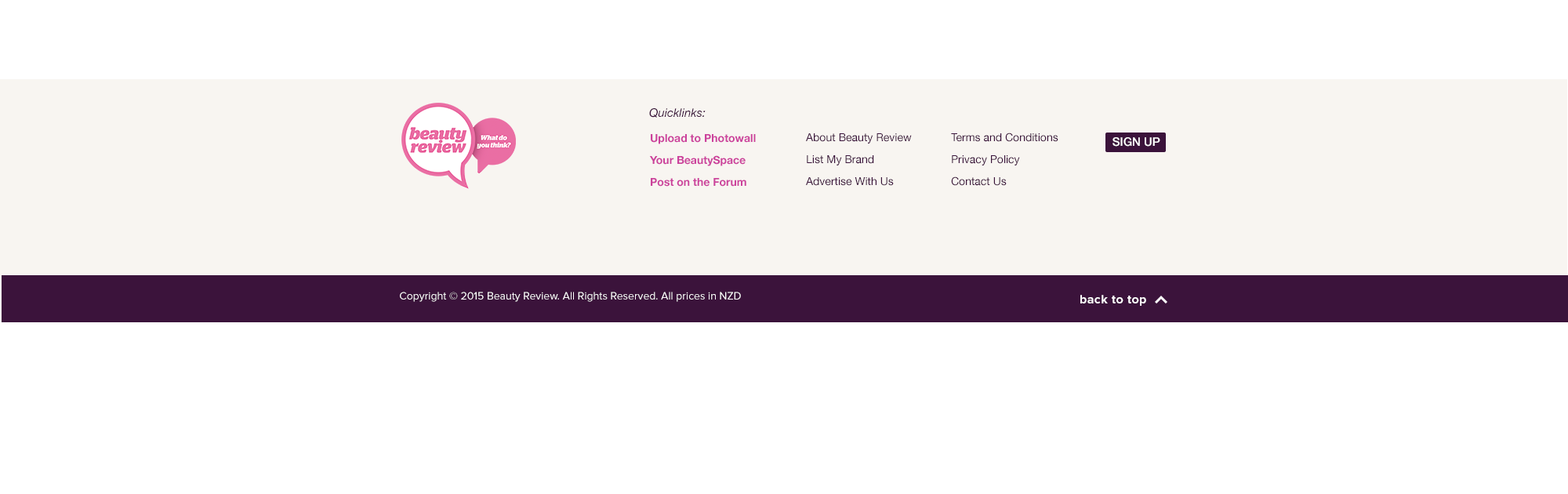
<style>
.page{position:relative;width:1568px;height:494px;background:#ffffff}
.page>*{position:absolute;margin:0}
.t1{font:11.8px "HelveticaNeue-Italic";color:#3b133b}
.t2{font:11px/22px "HelveticaNeue-Bold";color:#cc419c}
.t3{font:11px/22px "HelveticaNeue";color:#3b133b}
.t4{font:11.8px "HelveticaNeue-Medium";color:#ffffff}
.t5{font:11px "ProximaNova-Regular";color:#ffffff}
.t6{font:12.5px "ProximaNova-Bold";letter-spacing:0.025em;color:#ffffff}
</style>
<div class="page">
<p class="t1" style="left:649px;top:108px;width:57px;height:10px">Quicklinks:</p>
<p class="t2" style="left:649px;top:134px;width:107px;height:53px">Upload to Photowall<br>Your BeautySpace<br>Post on the Forum</p>
<p class="t3" style="left:806px;top:133px;width:106px;height:53px">About Beauty Review<br>List My Brand<br>Advertise With Us</p>
<p class="t3" style="left:951px;top:132px;width:107px;height:54px">Terms and Conditions<br>Privacy Policy<br>Contact Us</p>
<p class="t4" style="left:1112px;top:137px;width:48px;height:10px">SIGN UP</p>
<p class="t5" style="left:400px;top:292px;width:341px;height:10px">Copyright © 2015 Beauty Review. All Rights Reserved. All prices in NZD</p>
<p class="t6" style="left:1080px;top:295px;width:66px;height:11px">back to top</p>
</div>
